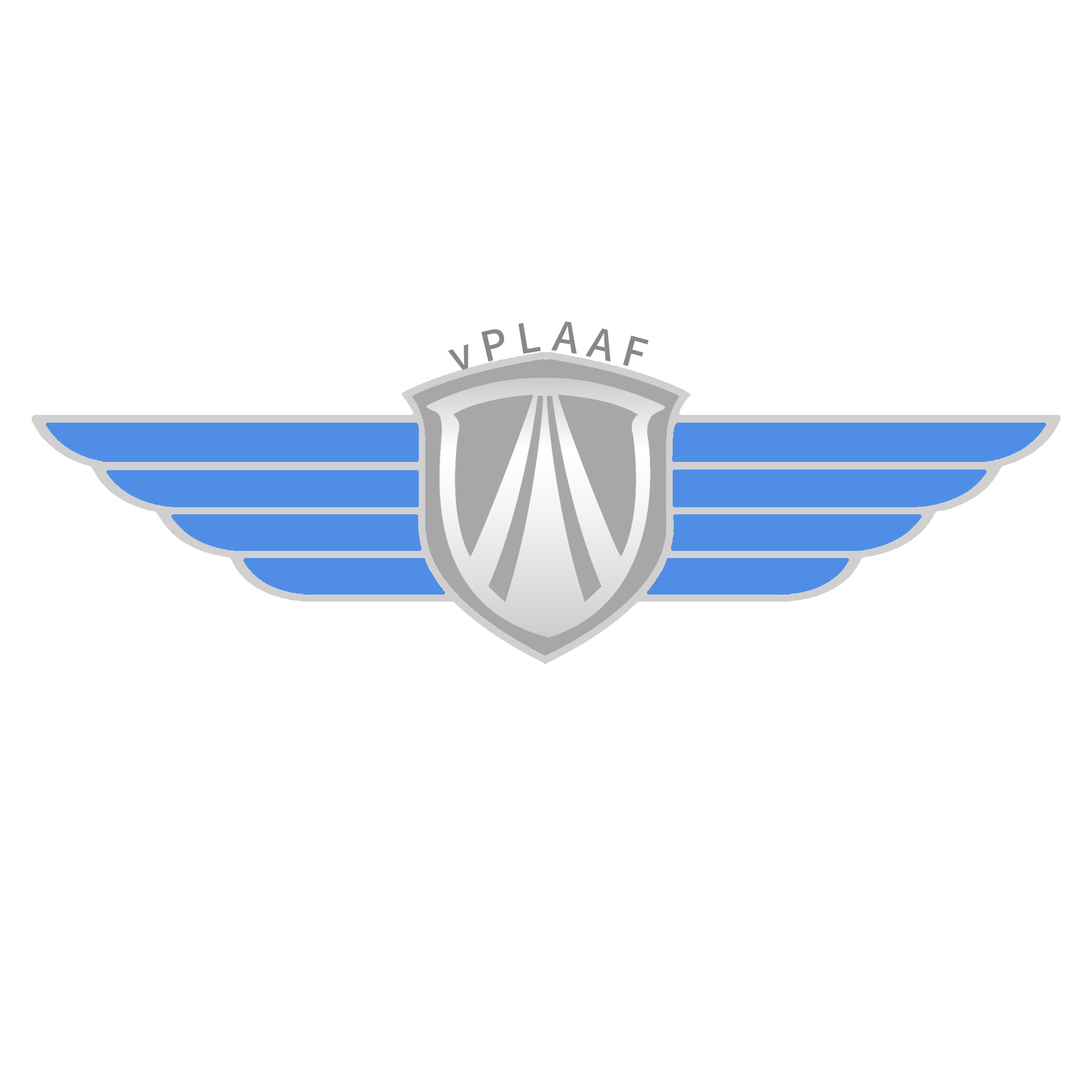
<style>
.page{position:relative;width:1092px;height:1092px;background:#ffffff}
.page>*{position:absolute;margin:0}
.t1{font:41px "SourceHanSansSCVF-Medium";color:#888888;font-weight:bold}
</style>
<div class="page">
<p class="t1" style="left:448px;top:321px;width:201px;height:49px;rotate:-1deg">v P L A A F</p>
</div>
